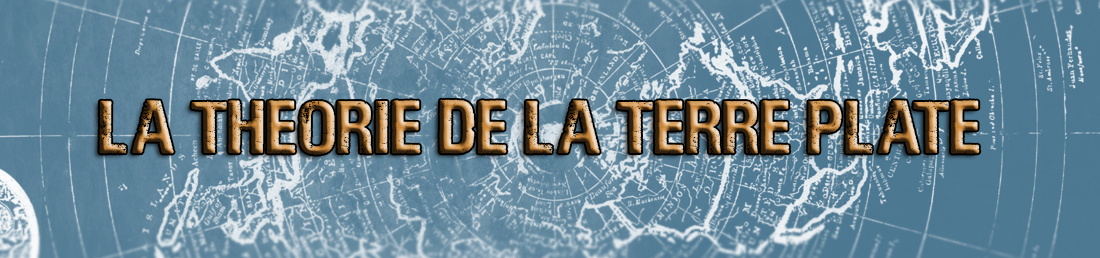
<style>
.page{position:relative;width:1100px;height:258px}
.page>*{position:absolute;margin:0}
.t1{font:87px "LOUDANDCLEARPERSONALUSE"}
</style>
<div class="page">
<p class="t1" style="left:99px;top:99px;width:881px;height:56px">La THEORIE DE LA TERRE Plate</p>
</div>
